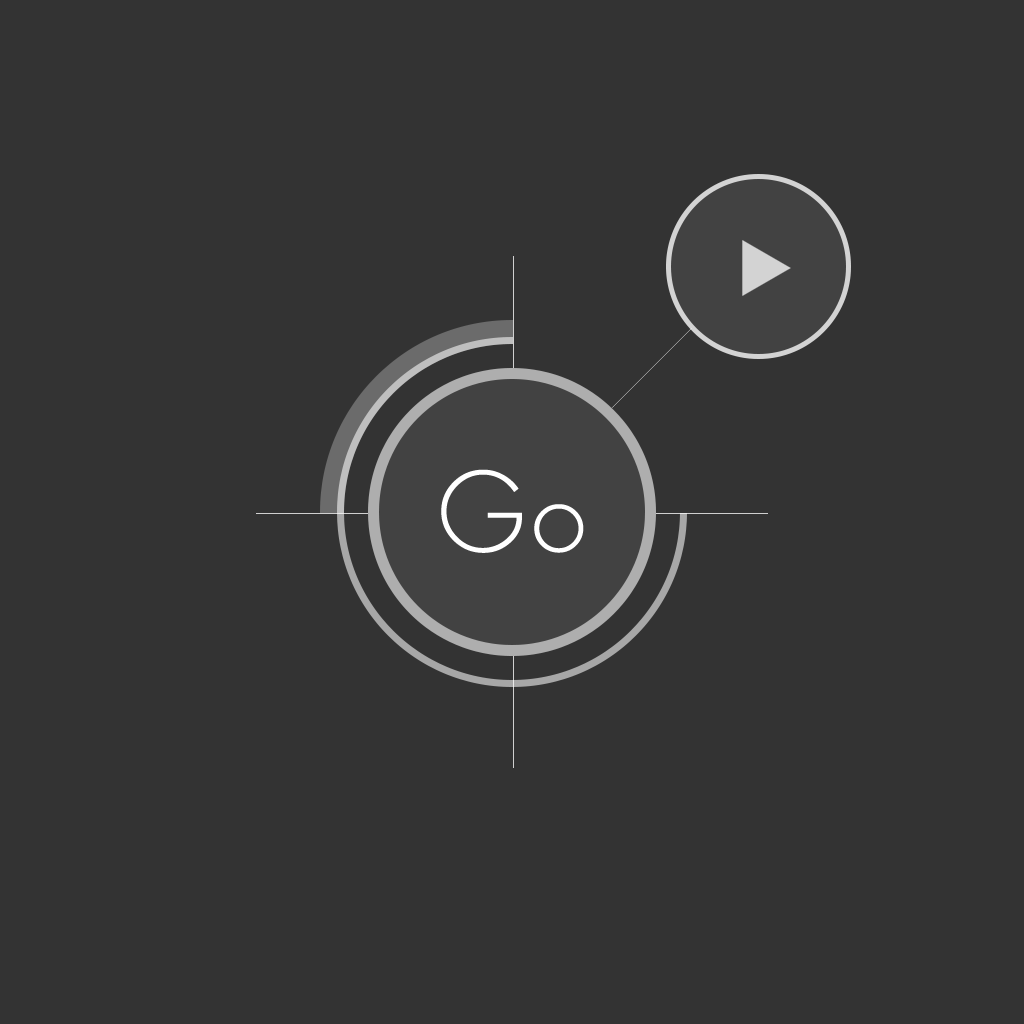
<style>
.page{position:relative;width:1024px;height:1024px;background:#333333}
.page>*{position:absolute;margin:0}
.t1{font:107px "AFuturicaLtThin";letter-spacing:0.05em;color:#ffffff}
</style>
<div class="page">
<p class="t1" style="left:441px;top:469px;width:143px;height:84px">Go</p>
</div>
